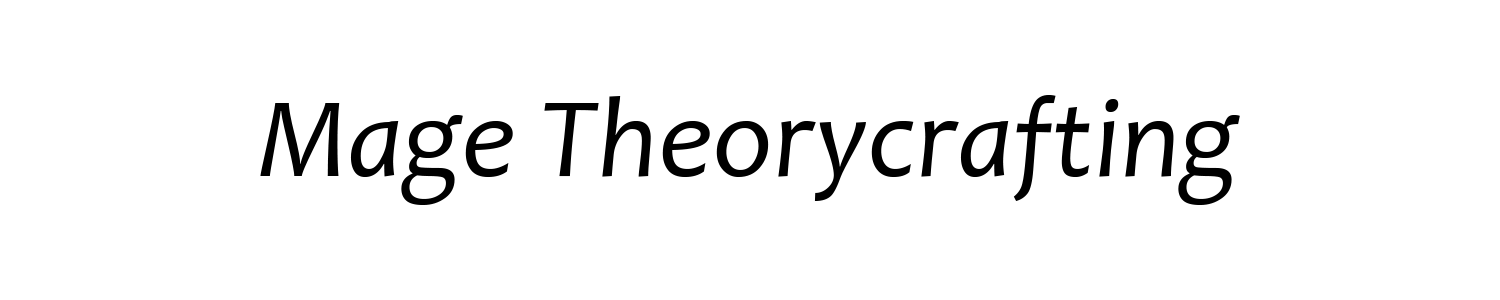
<style>
.page{position:relative;width:1500px;height:300px;background:#ffffff}
.page>*{position:absolute;margin:0}
.t1{font:115px "Candara-Italic";color:#000000}
</style>
<div class="page">
<p class="t1" style="left:260px;top:95px;width:980px;height:110px">Mage Theorycrafting</p>
</div>
